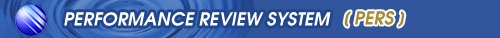
<style>
.page{position:relative;width:500px;height:38px;background:#30559c}
.page>*{position:absolute;margin:0}
.t1{font:18px "AvalonBoldItalic";color:#ffffff}
.t2{font:18px "AvalonBoldItalic";color:#a88934}
</style>
<div class="page">
<p class="t1" style="left:64px;top:12px;width:267px;height:14px">PERFORMANCE REVIEW SYSTEM</p>
<p class="t2" style="left:344px;top:11px;width:61px;height:16px">[ PERS ]</p>
</div>
